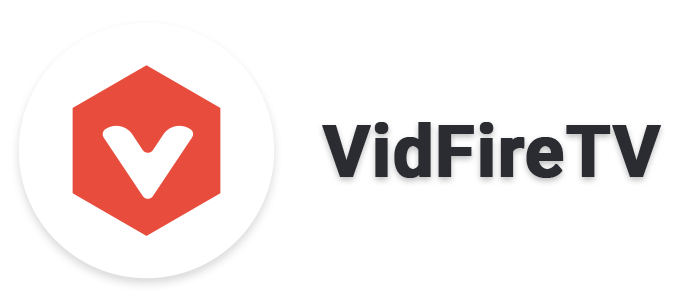
<style>
.page{position:relative;width:700px;height:300px;background:#ffffff}
.page>*{position:absolute;margin:0}
.t1{font:72px "Roboto-Bold";color:#2a2c31;font-weight:bold}
</style>
<div class="page">
<p class="t1" style="left:322px;top:122px;width:339px;height:56px">VidFireTV</p>
</div>
